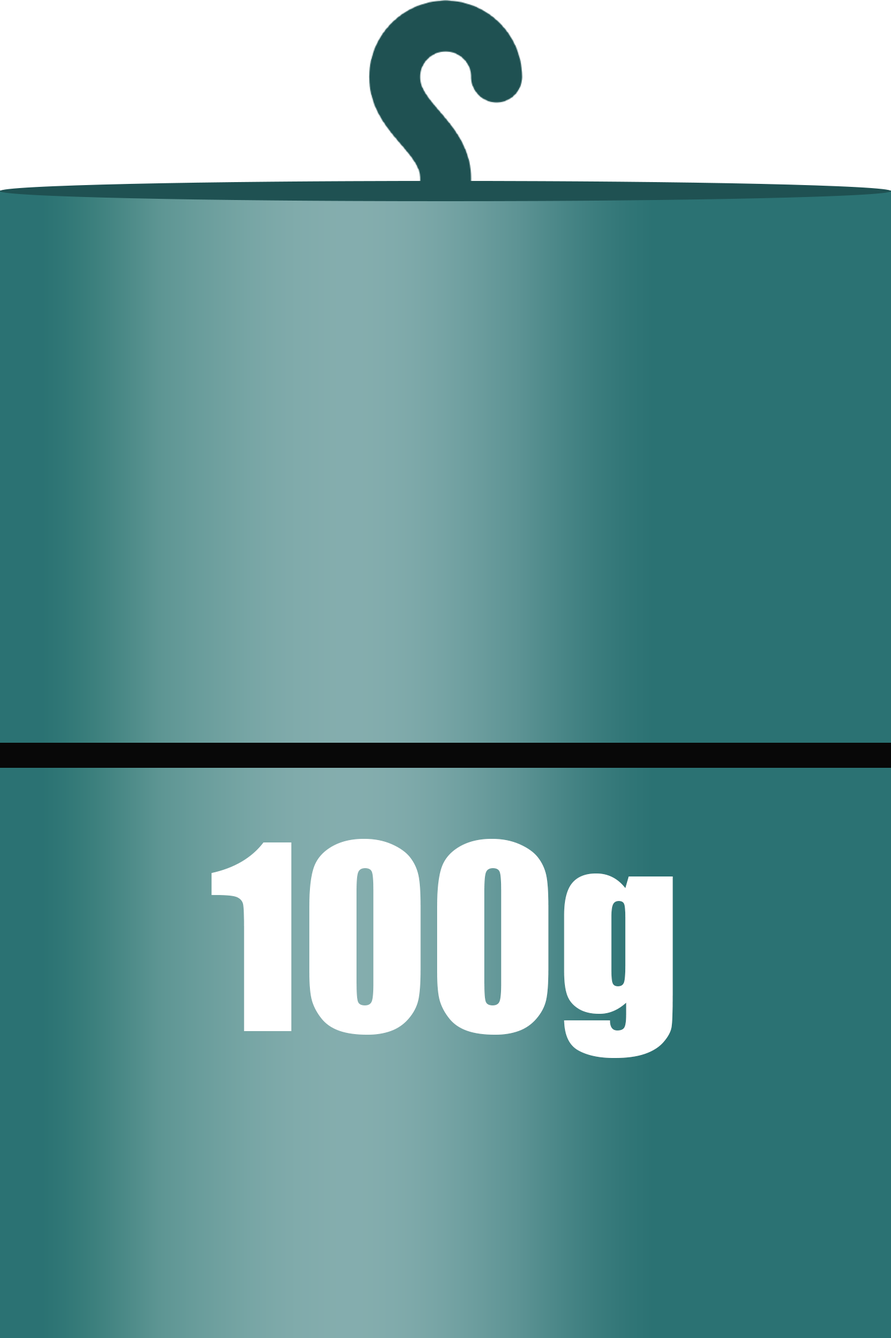
<style>
.page{position:relative;width:891px;height:1338px;background:#2b7273}
.page>*{position:absolute;margin:0}
.t1{font:238.9px "Impact";color:#ffffff}
</style>
<div class="page">
<p class="t1" style="left:211px;top:839px;width:462px;height:219px">100g</p>
</div>
